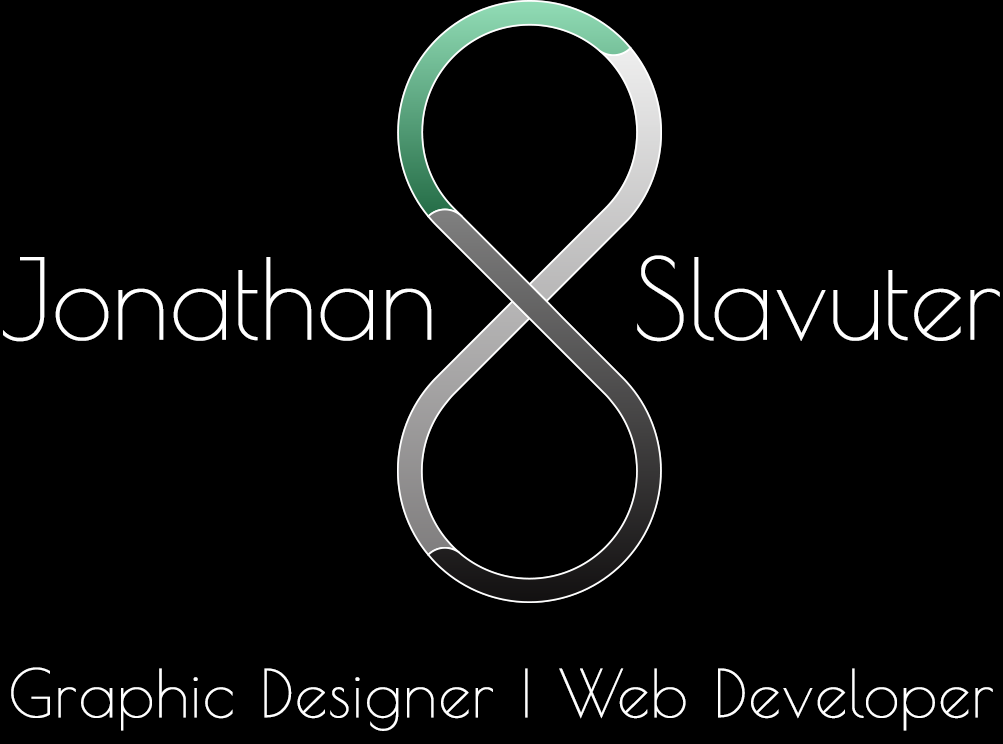
<style>
.page{position:relative;width:1003px;height:744px;background:#000000}
.page>*{position:absolute;margin:0}
.t1{font:110px "PoiretOne-Regular";color:#ffffff}
.t2{font:65px "PoiretOne-Regular";letter-spacing:0.02em;color:#ffffff}
</style>
<div class="page">
<p class="t1" style="left:3px;top:255px;width:997px;height:87px">Jonathan     Slavuter</p>
<p class="t2" style="left:11px;top:667px;width:982px;height:64px">Graphic Designer | Web Developer</p>
</div>
